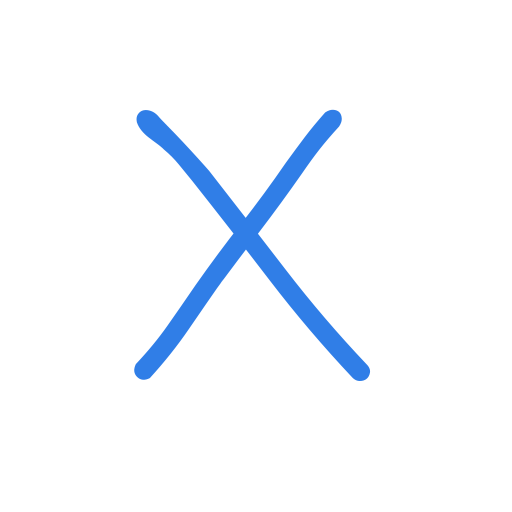
<style>
.page{position:relative;width:512px;height:512px;background:#ffffff}
.page>*{position:absolute;margin:0}
.t1{font:481.6px "ASensibleArmadillo";color:#307ee7}
</style>
<div class="page">
<p class="t1" style="left:134px;top:109px;width:237px;height:272px">X</p>
</div>
